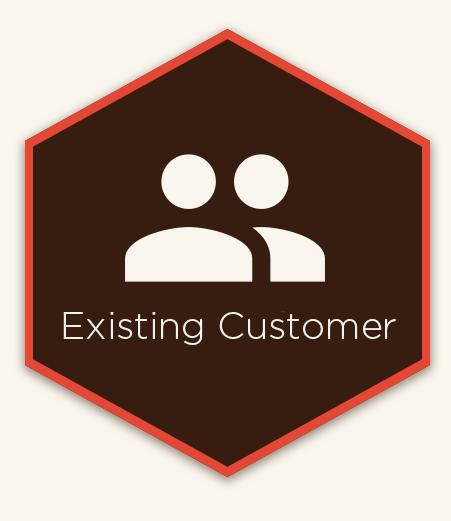
<style>
.page{position:relative;width:451px;height:521px;background:#361d10}
.page>*{position:absolute;margin:0}
.t1{font:37.5px "GothamLight";color:#f8f1e9}
</style>
<div class="page">
<p class="t1" style="left:63px;top:312px;width:333px;height:33px">Existing Customer</p>
</div>
